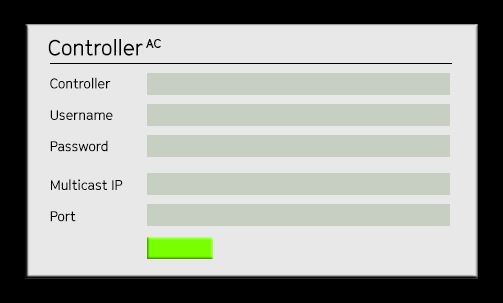
<style>
.page{position:relative;width:503px;height:303px;background:#e8e8e8}
.page>*{position:absolute;margin:0}
.t1{font:22px "CinetypeRegular";letter-spacing:-0.03em;color:#000000}
.t2{font:12.4px "CinetypeRegular";letter-spacing:-0.03em;color:#000000}
.t3{font:12.4px "CinetypeRegular";letter-spacing:-0.05em;color:#000000}
.t4{font:14px/31.3px "CinetypeRegular";letter-spacing:-0.03em;color:#000000}
.t5{font:14px/38.8px "CinetypeRegular";letter-spacing:-0.03em;color:#000000}
</style>
<div class="page">
<p class="t1" style="left:48px;top:39px;width:95px;height:17px">Controller</p>
<p class="t2" style="left:146px;top:39px;width:15px;height:9px">A<span class="t3">C</span></p>
<p class="t4" style="left:50px;top:77px;width:73px;height:145px">Controller<br>Username<br>Password<br><span class="t5">Multicast IP<br></span>Port</p>
</div>
